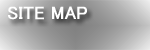
<style>
.page{position:relative;width:150px;height:50px}
.page>*{position:absolute;margin:0}
.t1{font:18px "MS-PGothic";color:#ffffff;font-weight:bold}
</style>
<div class="page">
<p class="t1" style="left:8px;top:6px;width:79px;height:14px">SITE MAP</p>
</div>
